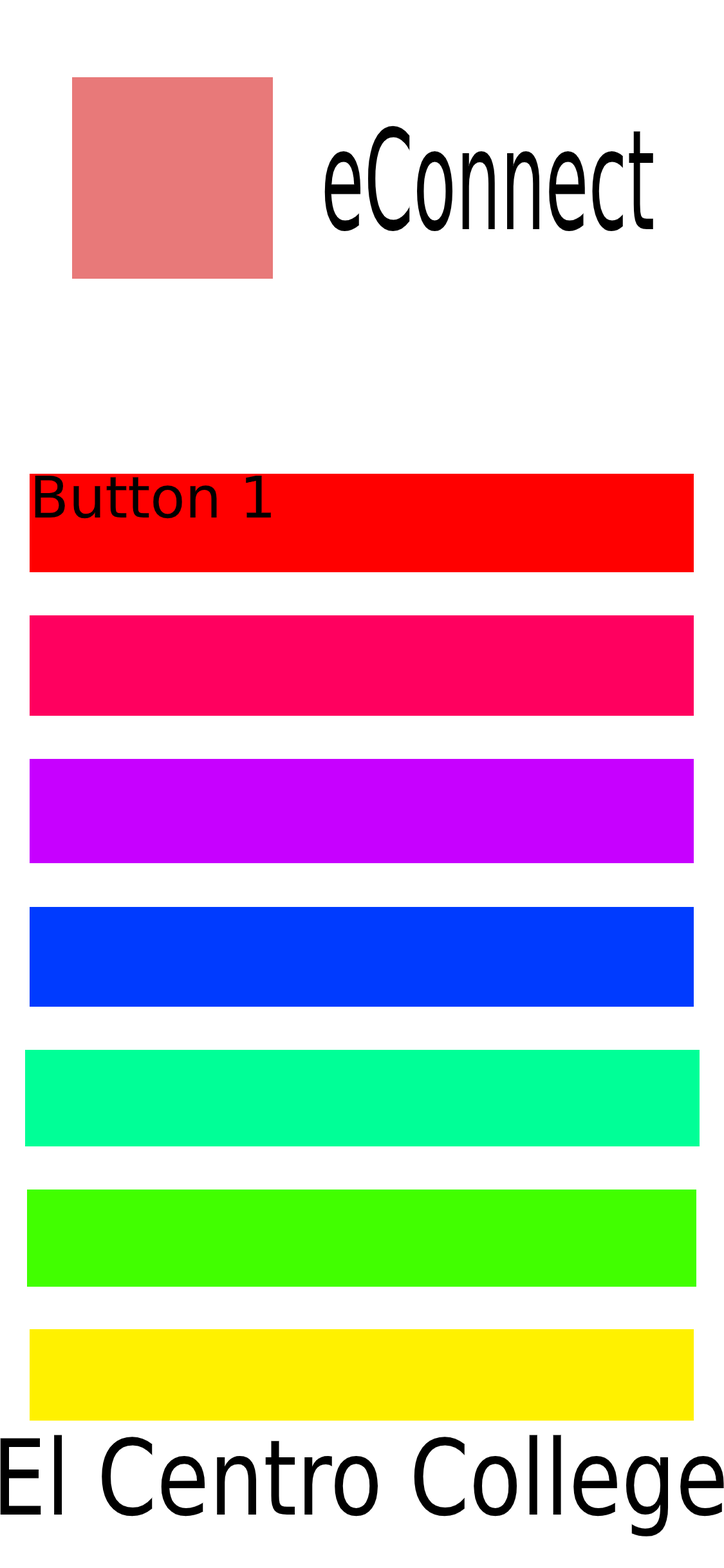
<style>
.page{position:relative;width:724px;height:1568px;background:#ffffff}
.page>*{position:absolute;margin:0}
.t1{font:139px "DejaVuSans";color:#000000;scale:0.51 1}
.t2{font:57.3px "DejaVuSans";color:#000000}
.t3{font:104.7px "DejaVuSans";color:#000000;scale:0.82 1}
</style>
<div class="page">
<p class="t1" style="left:324px;top:126px;width:329px;height:105px">eConnect</p>
<p class="t2" style="left:35px;top:476px;width:236px;height:43px">Button 1</p>
<p class="t3" style="left:0px;top:1435px;width:724px;height:101px">El Centro College</p>
</div>
